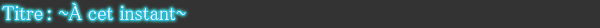
<style>
.page{position:relative;width:600px;height:28px;background:#333333}
.page>*{position:absolute;margin:0}
.t1{font:20px "MS-PMincho";color:#ffffff}
</style>
<div class="page">
<p class="t1" style="left:2px;top:3px;width:184px;height:18px">Titre : ~À cet instant~</p>
</div>
